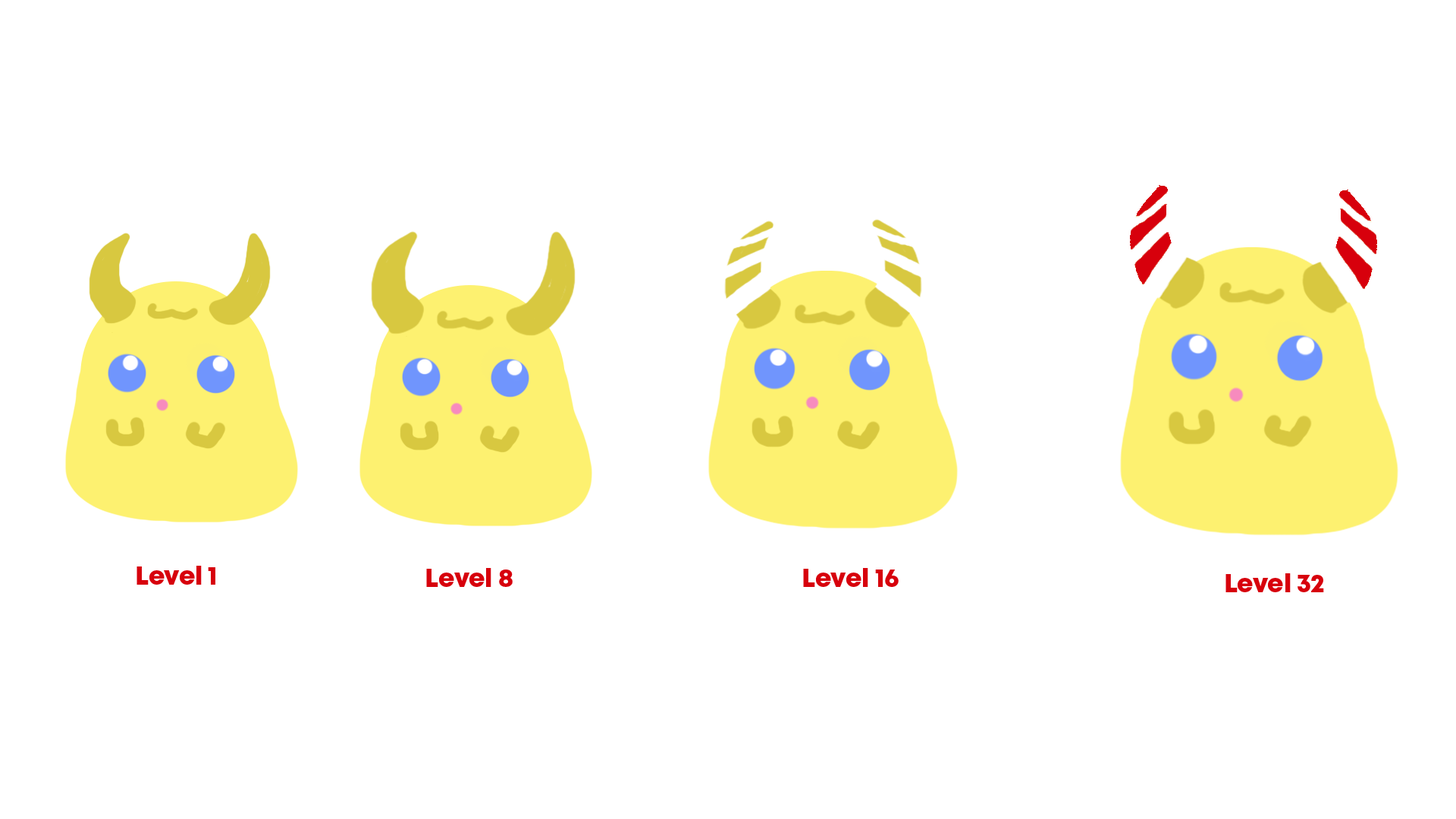
<style>
.page{position:relative;width:1456px;height:819px;background:#ffffff}
.page>*{position:absolute;margin:0}
.t1{font:25.3px "Mont-HeavyDEMO";color:#d7000c}
</style>
<div class="page">
<p class="t1" style="left:136px;top:566px;width:79px;height:19px">Level 1</p>
<p class="t1" style="left:426px;top:568px;width:87px;height:19px">Level 8</p>
<p class="t1" style="left:803px;top:568px;width:96px;height:19px">Level 16</p>
<p class="t1" style="left:1225px;top:573px;width:99px;height:19px">Level 32</p>
</div>
